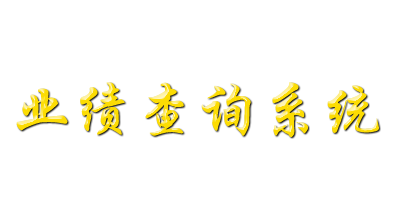
<style>
.page{position:relative;width:400px;height:200px;background:#ffffff}
.page>*{position:absolute;margin:0}
.t1{font:62px "STXingkai";color:#fcdc03}
</style>
<div class="page">
<p class="t1" style="left:16px;top:82px;width:363px;height:55px">业绩查询系统</p>
</div>
